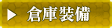
<style>
.page{position:relative;width:112px;height:28px}
.page>*{position:absolute;margin:0}
.t1{font:16px "RyuminPr6N-ExBold";color:#fffdfb}
</style>
<div class="page">
<p class="t1" style="left:27px;top:6px;width:64px;height:16px">倉庫裝備</p>
</div>
